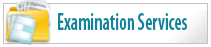
<style>
.page{position:relative;width:211px;height:47px;background:#ffffff}
.page>*{position:absolute;margin:0}
.t1{font:24px "MyriadPro-SemiboldCond";color:#11839a;scale:0.78 1}
</style>
<div class="page">
<p class="t1" style="left:58px;top:13px;width:130px;height:17px">Examination Services</p>
</div>
